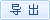
<style>
.page{position:relative;width:50px;height:20px}
.page>*{position:absolute;margin:0}
.t1{font:12px "SimSun";color:#294f76}
</style>
<div class="page">
<p class="t1" style="left:10px;top:4px;width:28px;height:11px">导 出</p>
</div>
